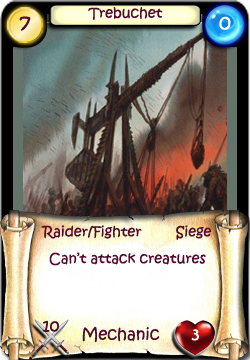
<style>
.page{position:relative;width:250px;height:360px}
.page>*{position:absolute;margin:0}
.t1{font:20px "KristenITC-Regular";color:#51092d}
.t2{font:14px "KristenITC-Regular";color:#51092d}
.t3{font:20px "KristenITC-Regular";color:#ffffff}
.t4{font:16px "KristenITC-Regular";color:#51092d}
.t5{font:16px "KristenITC-Regular";color:#fefefe}
</style>
<div class="page">
<p class="t1" style="left:19px;top:16px;width:12px;height:15px">7</p>
<p class="t2" style="left:88px;top:7px;width:75px;height:13px">Trebuchet</p>
<p class="t3" style="left:219px;top:16px;width:12px;height:14px">0</p>
<p class="t2" style="left:41px;top:225px;width:101px;height:14px">Raider/Fighter</p>
<p class="t2" style="left:176px;top:225px;width:36px;height:15px">Siege</p>
<p class="t2" style="left:49px;top:252px;width:157px;height:14px">Can’t attack creatures</p>
<p class="t4" style="left:42px;top:320px;width:17px;height:12px">10</p>
<p class="t4" style="left:82px;top:326px;width:78px;height:17px">Mechanic</p>
<p class="t5" style="left:191px;top:329px;width:8px;height:12px">3</p>
</div>
